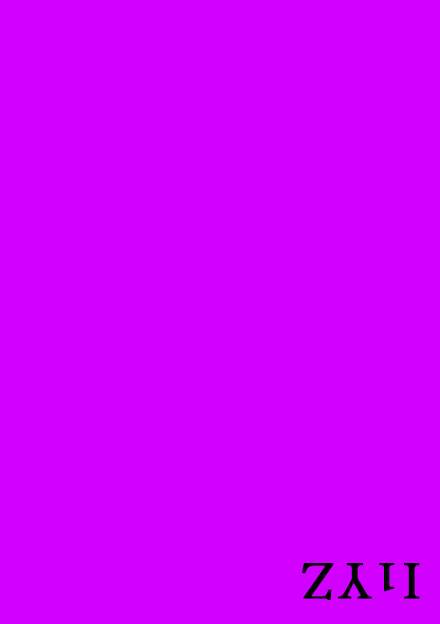
<style>
.page{position:relative;width:440px;height:624px;background:#d200ff}
.page>*{position:absolute;margin:0}
.t1{font:64.9px "AdobeThai-Regular";letter-spacing:0.02em;color:#000000;font-weight:bold}
</style>
<div class="page">
<p class="t1" style="left:302px;top:563px;width:118px;height:37px;rotate:180deg">I1YZ</p>
</div>
